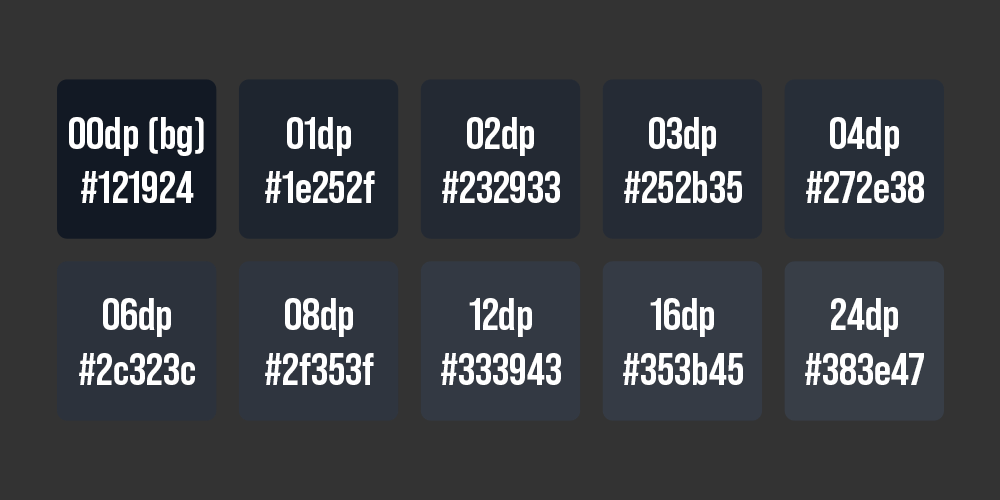
<style>
.page{position:relative;width:1000px;height:500px;background:#333333}
.page>*{position:absolute;margin:0}
.t1{font:45.2px "BebasNeuePro-Bold";color:#ffffff}
</style>
<div class="page">
<p class="t1" style="left:69px;top:117px;width:135px;height:86px;text-align:center">00dp (bg)<br>#121924</p>
<p class="t1" style="left:265px;top:117px;width:110px;height:86px;text-align:center">01dp<br>#1e252f</p>
<p class="t1" style="left:442px;top:117px;width:118px;height:86px;text-align:center">02dp<br>#232933</p>
<p class="t1" style="left:624px;top:117px;width:118px;height:86px;text-align:center">03dp<br>#252b35</p>
<p class="t1" style="left:806px;top:117px;width:118px;height:86px;text-align:center">04dp<br>#272e38</p>
<p class="t1" style="left:79px;top:298px;width:116px;height:87px;text-align:center">06dp<br>#2c323c</p>
<p class="t1" style="left:265px;top:298px;width:109px;height:87px;text-align:center">08dp<br>#2f353f</p>
<p class="t1" style="left:441px;top:298px;width:120px;height:87px;text-align:center">12dp<br>#333943</p>
<p class="t1" style="left:623px;top:298px;width:120px;height:87px;text-align:center">16dp<br>#353b45</p>
<p class="t1" style="left:805px;top:298px;width:119px;height:87px;text-align:center">24dp<br>#383e47</p>
</div>
